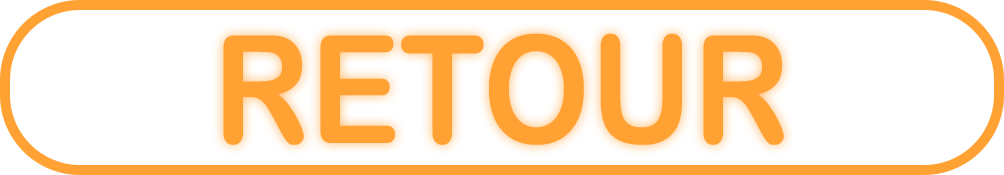
<style>
.page{position:relative;width:1004px;height:175px;background:#ffffff}
.page>*{position:absolute;margin:0}
.t1{font:150px "ArialRoundedMTBold";color:#ffa133;text-transform:uppercase;scale:0.9 1}
</style>
<div class="page">
<p class="t1" style="left:223px;top:33px;width:561px;height:112px">Retour</p>
</div>
